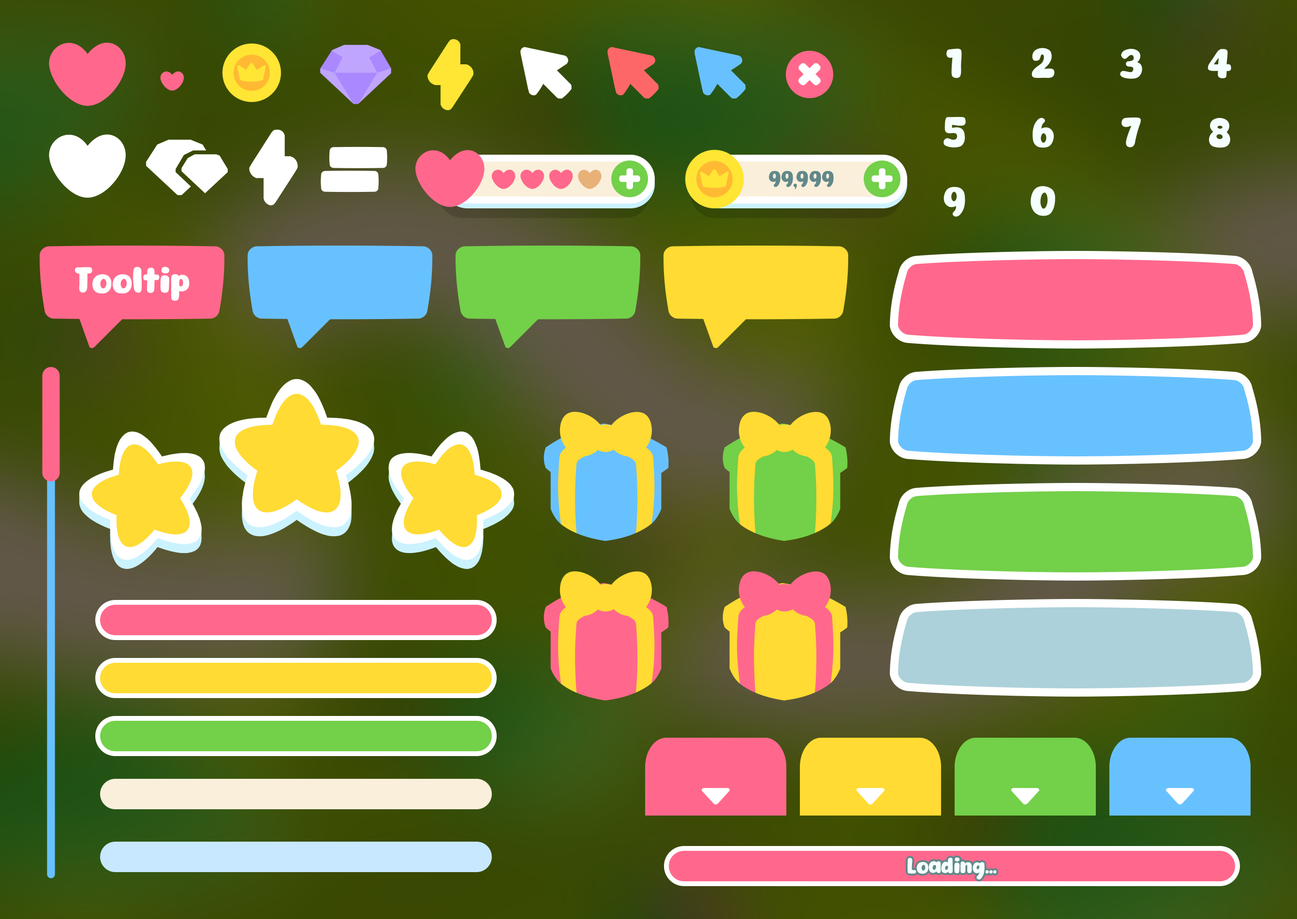
<style>
.page{position:relative;width:1297px;height:919px}
.page>*{position:absolute;margin:0}
.t1{font:21.8px "Eazy-Chat";color:#62888a}
.t2{font:34.8px "Eazy-Chat";color:#fffeff}
.t3{font:21.3px "Eazy-Chat";color:#f5ffff}
</style>
<div class="page">
<p class="t1" style="left:769px;top:171px;width:65px;height:19px">99,999</p>
<p class="t2" style="left:75px;top:267px;width:115px;height:34px">Tooltip</p>
<p class="t3" style="left:907px;top:857px;width:90px;height:23px">Loading...</p>
</div>
